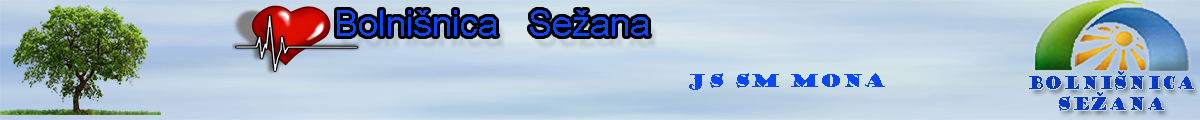
<style>
.page{position:relative;width:1200px;height:120px}
.page>*{position:absolute;margin:0}
.t1{font:36px "DokChampa";color:#0a47f6}
.t2{font:18px "GoudyStout";color:#0a47f6}
.t3{font:17.5px "GoudyStout";color:#0837c0;scale:0.83 1}
</style>
<div class="page">
<p class="t1" style="left:337px;top:10px;width:312px;height:26px">Bolnišnica   Sežana</p>
<p class="t2" style="left:689px;top:73px;width:196px;height:17px">js sm mona</p>
<p class="t3" style="left:1029px;top:71px;width:165px;height:40px">BOLNIŠNICA <br>     SEŽANA</p>
</div>
